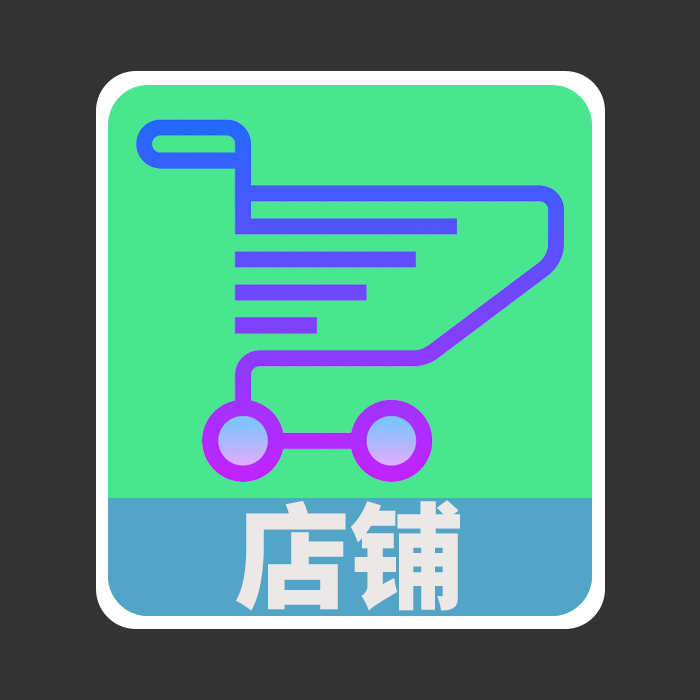
<style>
.page{position:relative;width:700px;height:700px;background:#333333}
.page>*{position:absolute;margin:0}
.t1{font:115px "NotoSansSC-Black";color:#ece8e8}
</style>
<div class="page">
<p class="t1" style="left:236px;top:500px;width:224px;height:111px">店铺</p>
</div>
